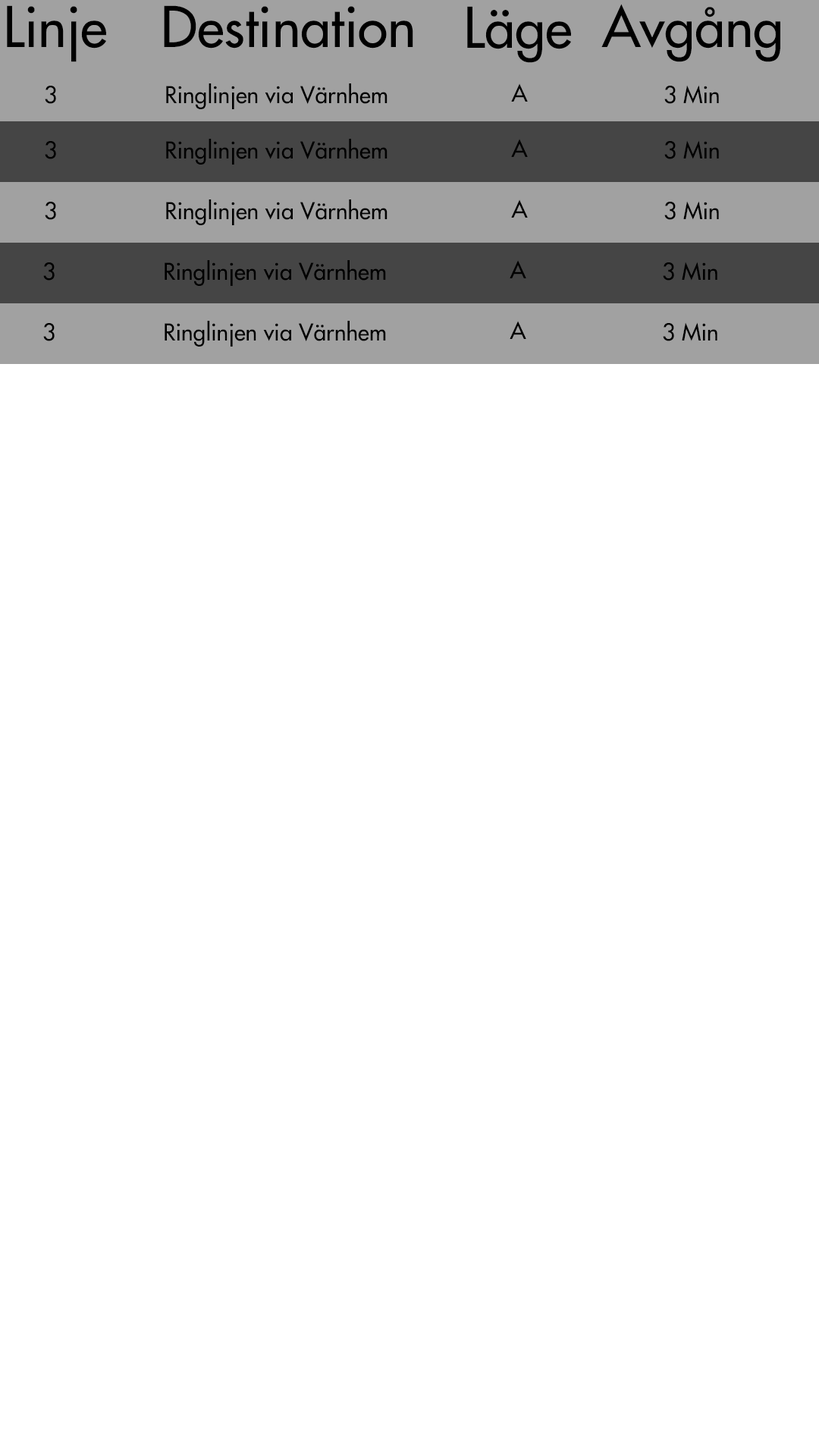
<style>
.page{position:relative;width:819px;height:1456px;background:#ffffff}
.page>*{position:absolute;margin:0}
.t1{font:54.6px "FuturaLT";color:#000000}
.t2{font:22.7px "FuturaLT";color:#000000}
</style>
<div class="page">
<p class="t1" style="left:7px;top:5px;width:99px;height:57px">Linje</p>
<p class="t1" style="left:164px;top:5px;width:249px;height:44px">Destination</p>
<p class="t1" style="left:601px;top:4px;width:179px;height:58px">Avgång</p>
<p class="t1" style="left:467px;top:6px;width:104px;height:57px">Läge</p>
<p class="t2" style="left:45px;top:86px;width:11px;height:18px">3</p>
<p class="t2" style="left:166px;top:83px;width:222px;height:26px">Ringlinjen via Värnhem</p>
<p class="t2" style="left:511px;top:83px;width:17px;height:19px">A</p>
<p class="t2" style="left:664px;top:85px;width:55px;height:19px">3 Min</p>
<p class="t2" style="left:45px;top:141px;width:11px;height:18px">3</p>
<p class="t2" style="left:166px;top:139px;width:222px;height:26px">Ringlinjen via Värnhem</p>
<p class="t2" style="left:511px;top:139px;width:17px;height:18px">A</p>
<p class="t2" style="left:664px;top:140px;width:55px;height:19px">3 Min</p>
<p class="t2" style="left:45px;top:202px;width:11px;height:18px">3</p>
<p class="t2" style="left:166px;top:199px;width:222px;height:26px">Ringlinjen via Värnhem</p>
<p class="t2" style="left:511px;top:199px;width:17px;height:19px">A</p>
<p class="t2" style="left:664px;top:201px;width:55px;height:19px">3 Min</p>
<p class="t2" style="left:43px;top:262px;width:12px;height:19px">3</p>
<p class="t2" style="left:165px;top:260px;width:221px;height:26px">Ringlinjen via Värnhem</p>
<p class="t2" style="left:510px;top:260px;width:16px;height:18px">A</p>
<p class="t2" style="left:663px;top:262px;width:54px;height:19px">3 Min</p>
<p class="t2" style="left:43px;top:323px;width:12px;height:18px">3</p>
<p class="t2" style="left:165px;top:321px;width:221px;height:26px">Ringlinjen via Värnhem</p>
<p class="t2" style="left:510px;top:321px;width:16px;height:18px">A</p>
<p class="t2" style="left:663px;top:322px;width:54px;height:19px">3 Min</p>
</div>
